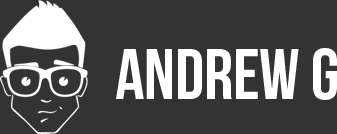
<style>
.page{position:relative;width:337px;height:134px;background:#333333}
.page>*{position:absolute;margin:0}
.t1{font:72px "BebasNeue";color:#ffffff}
</style>
<div class="page">
<p class="t1" style="left:116px;top:48px;width:221px;height:52px">Andrew G</p>
</div>
